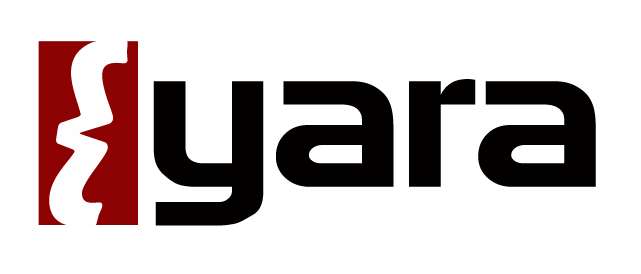
<style>
.page{position:relative;width:641px;height:274px;background:#ffffff}
.page>*{position:absolute;margin:0}
.t1{font:200px "Longview";color:#040000;scale:1.09 1}
</style>
<div class="page">
<p class="t1" style="left:153px;top:79px;width:443px;height:147px">yara</p>
</div>
